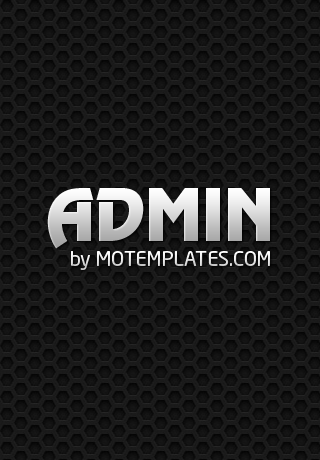
<style>
.page{position:relative;width:320px;height:460px}
.page>*{position:absolute;margin:0}
.t1{font:65px "RevueStd"}
.t2{font:20px "NeoSans";color:#ededed}
</style>
<div class="page">
<p class="t1" style="left:47px;top:188px;width:223px;height:61px">ADMIN</p>
<p class="t2" style="left:71px;top:251px;width:199px;height:19px">by MOTEMPLATES.COM</p>
</div>
